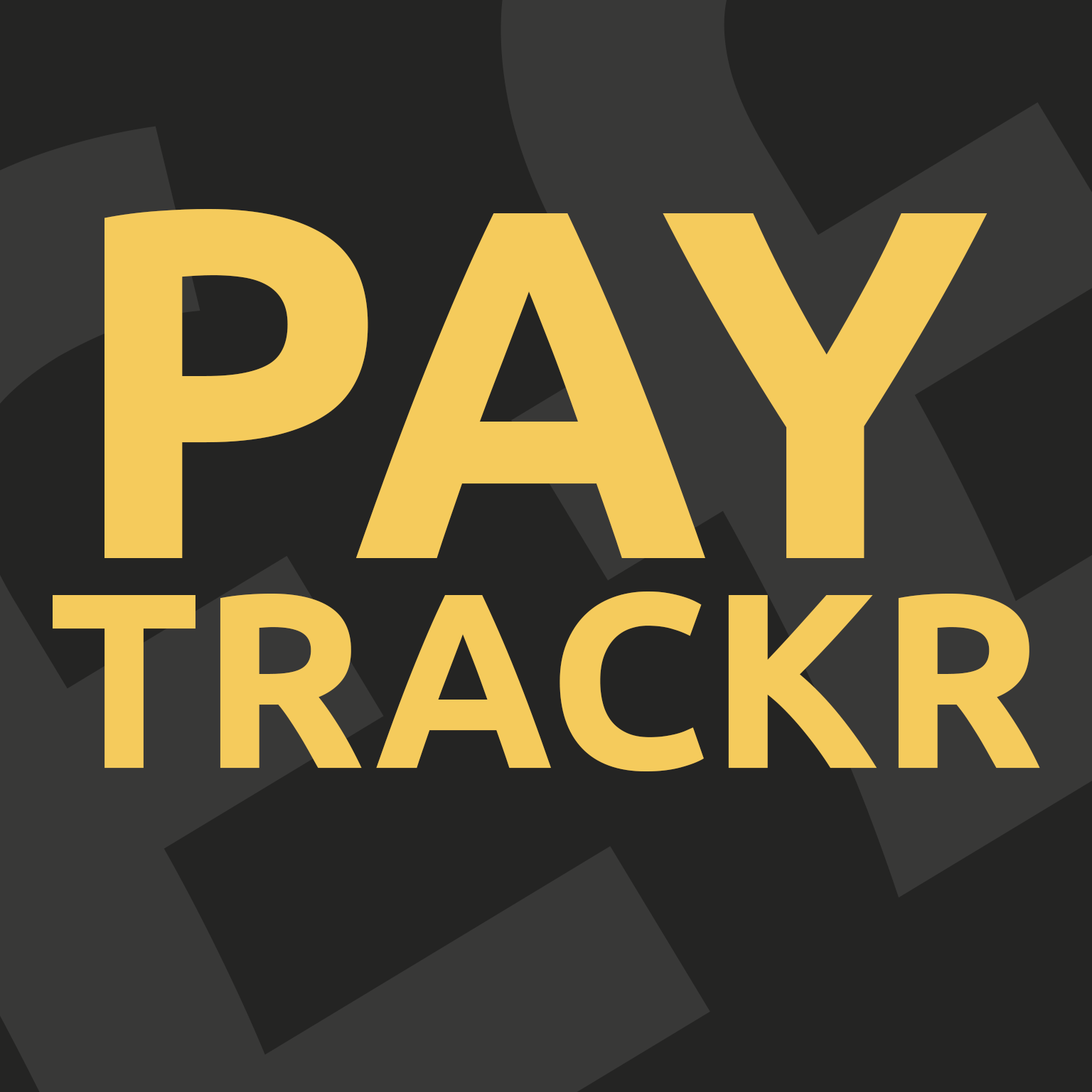
<style>
.page{position:relative;width:1092px;height:1092px;background:#242423}
.page>*{position:absolute;margin:0}
.t1{font:497.6px "Ubuntu-Bold";color:#f5cb5c}
.t2{font:248.8px "Ubuntu-Bold";color:#f5cb5c}
</style>
<div class="page">
<p class="t1" style="left:105px;top:209px;width:882px;height:349px">PAY</p>
<p class="t2" style="left:53px;top:591px;width:987px;height:180px">TRACKR</p>
</div>
